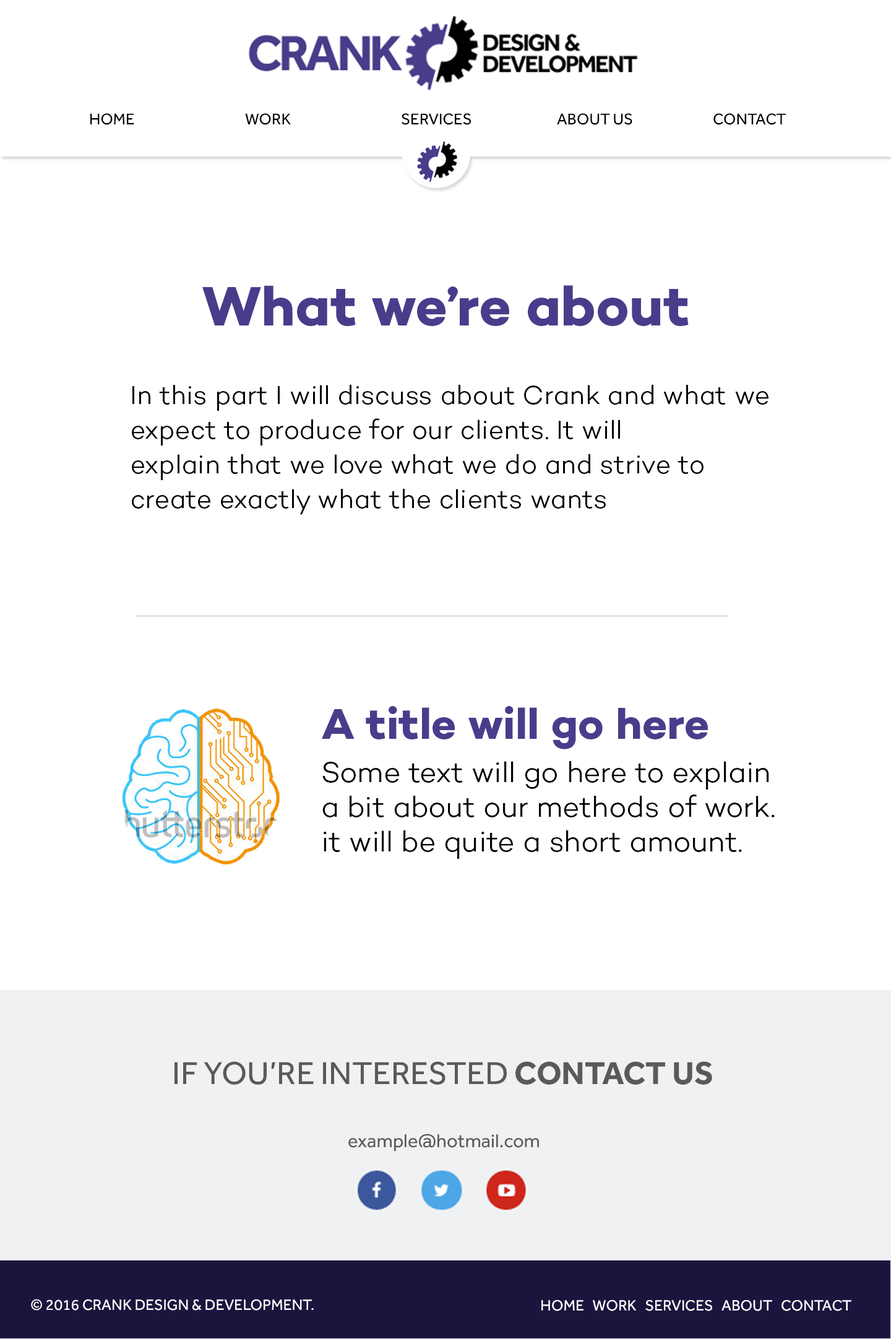
<style>
.page{position:relative;width:891px;height:1339px;background:#ffffff}
.page>*{position:absolute;margin:0}
.t1{font:16.1px "Effra-Regular";color:#000000}
.t2{font:56.3px "Campton-BoldDEMO";color:#483d8b}
.t3{font:26.6px/34.6px "Campton-LightDEMO";color:#000000}
.t4{font:43.9px "Campton-BoldDEMO";color:#483d8b}
.t5{font:29.1px/34.6px "Campton-LightDEMO";color:#000000}
.t6{font:32.8px "Effra-Regular";color:#5a5a5a;text-transform:uppercase}
.t7{font:32.8px "Effra-Bold";color:#5a5a5a;text-transform:uppercase}
.t8{font:19.2px "Effra-Regular";color:#5a5a5a}
.t9{font:15.5px "Effra-Regular";color:#ffffff}
</style>
<div class="page">
<p class="t1" style="left:90px;top:113px;width:696px;height:12px">HOME     WORK     SERVICES    ABOUT US    CONTACT</p>
<p class="t2" style="left:202px;top:285px;width:486px;height:41px">What we’re about</p>
<p class="t3" style="left:132px;top:384px;width:636px;height:131px">In this part I will discuss about Crank and what we expect to produce for our clients. It will <br>explain that we love what we do and strive to create exactly what the clients wants</p>
<p class="t4" style="left:322px;top:706px;width:386px;height:43px">A title will go here</p>
<p class="t5" style="left:322px;top:761px;width:452px;height:98px">Some text will go here to explain a bit about our methods of work. it will be quite a short amount.</p>
<p class="t6" style="left:174px;top:1061px;width:538px;height:23px">if you’re interested <span class="t7">Contact us</span></p>
<p class="t8" style="left:348px;top:1133px;width:191px;height:18px">example@hotmail.com</p>
<p class="t9" style="left:31px;top:1299px;width:283px;height:11px">© 2016 CRANK DESIGN &amp; DEVELOPMENT.</p>
<p class="t9" style="left:541px;top:1300px;width:310px;height:11px">HOME   WORK   SERVICES   ABOUT   CONTACT</p>
</div>
